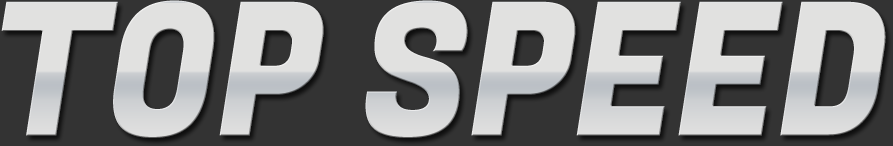
<style>
.page{position:relative;width:893px;height:146px;background:#333333}
.page>*{position:absolute;margin:0}
.t1{font:185.2px "FugazOne-Regular";color:#dfdfdf;scale:0.89 1}
</style>
<div class="page">
<p class="t1" style="left:1px;top:0px;width:885px;height:138px">TOP SPEED</p>
</div>
